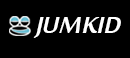
<style>
.page{position:relative;width:130px;height:58px;background:#000000}
.page>*{position:absolute;margin:0}
.t1{font:36.8px "MoolBoran";color:#ffffff}
</style>
<div class="page">
<p class="t1" style="left:33px;top:17px;width:88px;height:21px">JUMKID</p>
</div>
